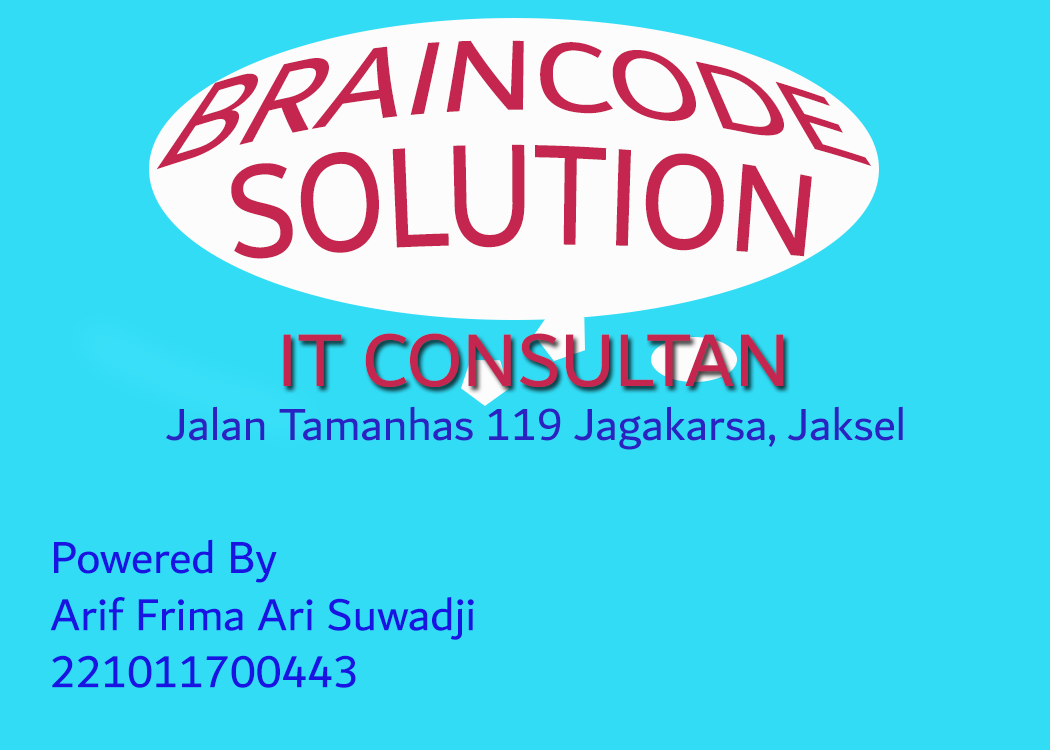
<style>
.page{position:relative;width:1050px;height:750px;background:#32dcf5}
.page>*{position:absolute;margin:0}
.t1{font:127px "Dubai-Regular";color:#c4264f}
.t2{font:79.4px "Dubai-Regular";color:#c4264f}
.t3{font:47.6px "Dubai-Regular";color:#2a23c2}
.t4{font:47.6px "Dubai-Regular";color:#1914e1}
</style>
<div class="page">
<p class="t1" style="left:156px;top:40px;width:715px;height:130px">BRAINCODE</p>
<p class="t1" style="left:231px;top:144px;width:581px;height:115px">SOLUTION</p>
<p class="t2" style="left:283px;top:333px;width:501px;height:54px">IT CONSULTAN</p>
<p class="t3" style="left:166px;top:406px;width:737px;height:44px">Jalan Tamanhas 119 Jagakarsa, Jaksel</p>
<p class="t4" style="left:50px;top:539px;width:424px;height:149px">Powered By<br>Arif Frima Ari Suwadji<br>221011700443</p>
</div>
